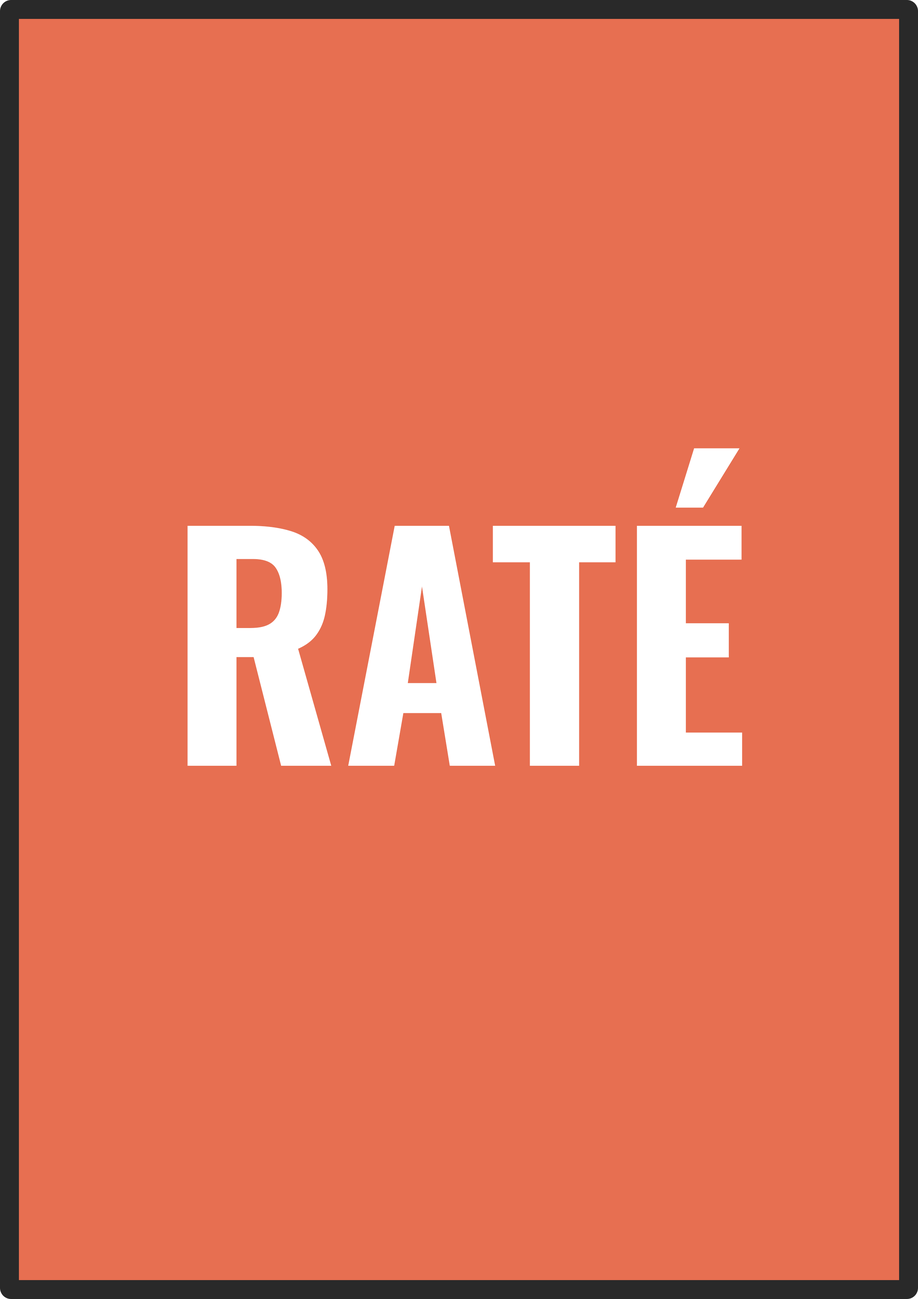
<style>
.page{position:relative;width:918px;height:1299px;background:#e76f51}
.page>*{position:absolute;margin:0}
.t1{font:296.2px "Oswald-SemiBold";color:#ffffff}
</style>
<div class="page">
<p class="t1" style="left:187px;top:448px;width:555px;height:318px">RATÉ</p>
</div>
